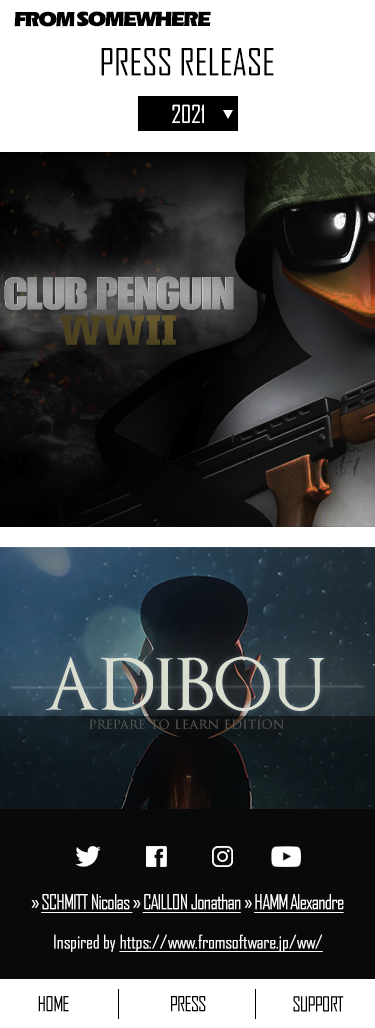
<style>
.page{position:relative;width:375px;height:1028px}
.page>*{position:absolute;margin:0}
.t1{font:21.4px "ErasITCbyBT-Ultra";letter-spacing:-0.075em;color:#000000}
.t2{font:36px "AgencyFB-Reg";color:#000000}
.t3{font:24px "AgencyFB-Reg";color:#ffffff}
.t4{font:42.7px "CallOfOpsDuty";letter-spacing:-0.025em;color:#999999}
.t5{font:42.7px "UnitedSerifReg-Black";letter-spacing:-0.01em;color:#4f4522}
.t6{font:70px "OptimusPrinceps";color:#daded1}
.t7{font:14px "TrajanPro3-Regular";color:#52544f}
.t8{font:20px "AgencyFB-Reg";letter-spacing:-0.05em;color:#ffffff;text-decoration:underline}
.t9{font:20px "AgencyFB-Reg";letter-spacing:-0.05em;color:#ffffff}
.t10{font:18px "AgencyFB-Reg";color:#ffffff;text-decoration:underline}
.t11{font:18px "AgencyFB-Reg";color:#ffffff}
.t12{font:20px "AgencyFB-Reg";letter-spacing:-0.05em;color:#000000}
</style>
<div class="page">
<p class="t1" style="left:14px;top:11px;width:61px;height:16px">FROM</p>
<p class="t1" style="left:77px;top:11px;width:134px;height:16px">SOMEWHERE</p>
<p class="t2" style="left:101px;top:48px;width:173px;height:28px">PRESS RELEASE</p>
<p class="t3" style="left:172px;top:104px;width:32px;height:19px">2021</p>
<p class="t4" style="left:4px;top:276px;width:230px;height:34px">CLUB PENGUIN</p>
<p class="t5" style="left:60px;top:315px;width:116px;height:30px">WWII</p>
<p class="t6" style="left:45px;top:656px;width:280px;height:55px">ADIBOU</p>
<p class="t7" style="left:89px;top:719px;width:195px;height:10px">prepare to learn edition</p>
<p class="t8" style="left:31px;top:894px;width:313px;height:19px"><span class="t9">» </span>SCHMITT Nicolas <span class="t9">» </span>CAILLON Jonathan<span class="t9"> » </span>HAMM Alexandre</p>
<p class="t10" style="left:54px;top:934px;width:269px;height:18px"><span class="t11">Inspired by </span>https://www.fromsoftware.jp/ww/</p>
<p class="t12" style="left:38px;top:996px;width:31px;height:16px">HOME</p>
<p class="t12" style="left:171px;top:996px;width:35px;height:16px">PRESS</p>
<p class="t12" style="left:293px;top:996px;width:51px;height:16px">SUPPORT</p>
</div>
